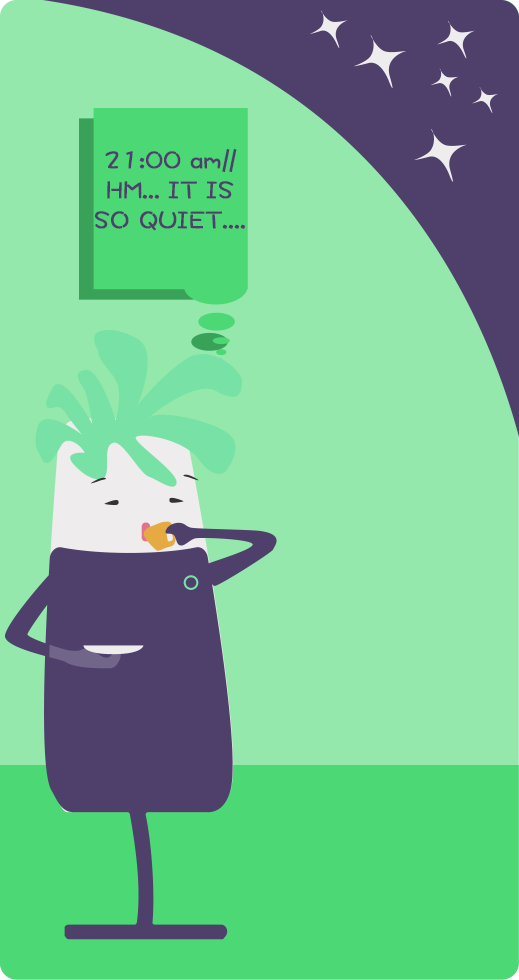
<style>
.page{position:relative;width:519px;height:980px;background:#94e8ac}
.page>*{position:absolute;margin:0}
.t1{font:25px "DFWaWaSC-W5";color:#4e3f6b;font-weight:bold}
</style>
<div class="page">
<p class="t1" style="left:95px;top:149px;width:150px;height:82px;text-align:center">21:00 am//<br>HM... IT IS SO QUIET....</p>
</div>
